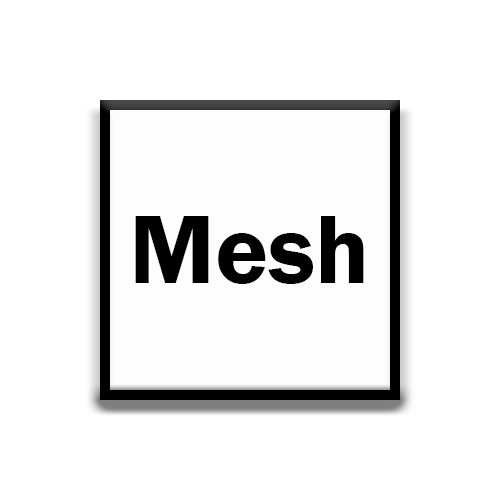
<style>
.page{position:relative;width:500px;height:500px;background:#ffffff}
.page>*{position:absolute;margin:0}
.t1{font:100px "FranklinGothic-Demi";color:#000000}
</style>
<div class="page">
<p class="t1" style="left:135px;top:216px;width:229px;height:68px">Mesh</p>
</div>
